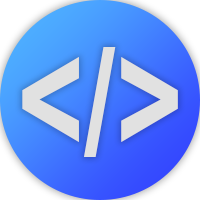
<style>
.page{position:relative;width:200px;height:200px}
.page>*{position:absolute;margin:0}
.t1{font:154.7px "GillSansMT-Bold";color:#e1e1e1;scale:0.74 1}
</style>
<div class="page">
<p class="t1" style="left:22px;top:47px;width:156px;height:110px">&lt;/&gt;</p>
</div>
